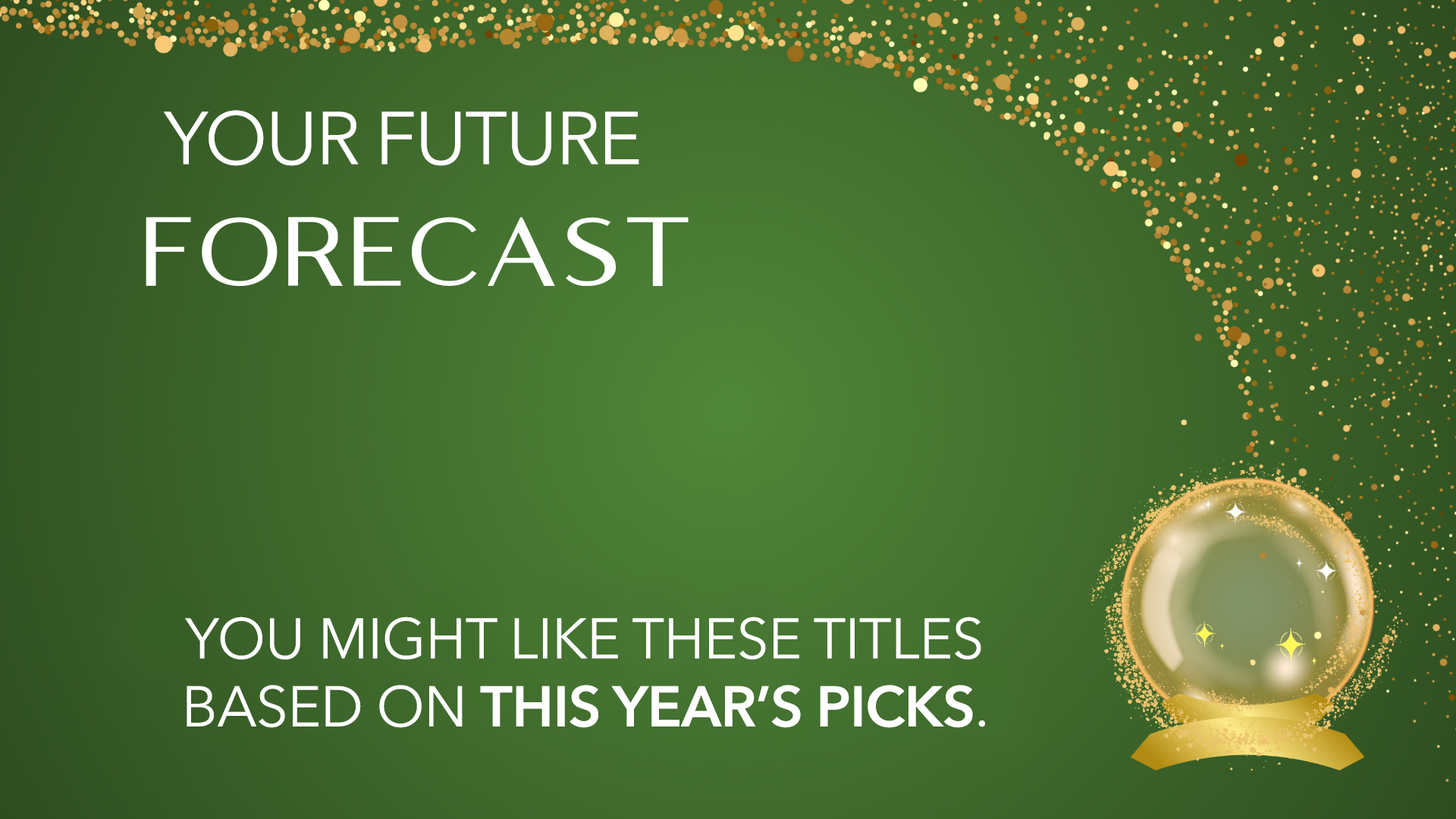
<style>
.page{position:relative;width:1456px;height:819px}
.page>*{position:absolute;margin:0}
.t1{font:73.8px "AvenirNext-Regular";letter-spacing:-0.025em;color:#ffffff}
.t2{font:56.6px "AvenirNext-Regular";letter-spacing:-0.01em;color:#ffffff}
.t3{font:56.6px "AvenirNext-DemiBold";letter-spacing:-0.01em;color:#ffffff}
</style>
<div class="page">
<p class="t1" style="left:163px;top:110px;width:476px;height:56px">YOUR FUTURE</p>
<p class="t2" style="left:185px;top:617px;width:800px;height:111px;text-align:center">YOU MIGHT LIKE THESE TITLES<br>BASED ON <span class="t3">THIS YEAR’S PICKS</span>.</p>
</div>
